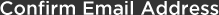
<style>
.page{position:relative;width:219px;height:15px;background:#333333}
.page>*{position:absolute;margin:0}
.t1{font:19px "GothamMedium";color:#ffffff}
</style>
<div class="page">
<p class="t1" style="left:0px;top:0px;width:219px;height:15px">Confirm Email Address</p>
</div>
